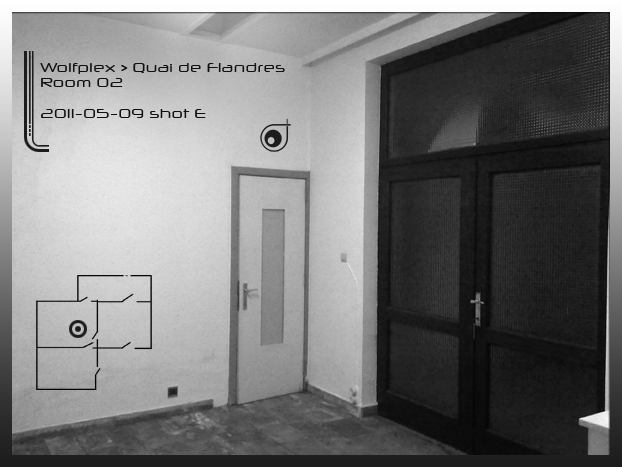
<style>
.page{position:relative;width:622px;height:467px}
.page>*{position:absolute;margin:0}
.t1{font:13px "NeuropolXFree";color:#101010}
</style>
<div class="page">
<p class="t1" style="left:40px;top:63px;width:245px;height:55px">Wolfplex &gt; Quai de Flandres<br>Room 02<br><br>2011-05-09 shot E</p>
</div>
